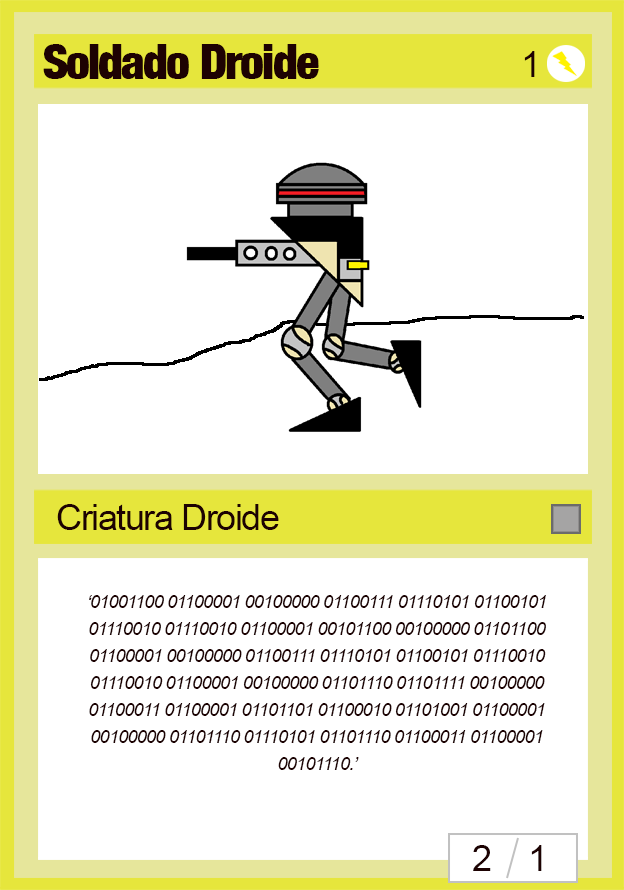
<style>
.page{position:relative;width:624px;height:890px;background:#ffffff}
.page>*{position:absolute;margin:0}
.t1{font:48px "Harvest";letter-spacing:-0.04em;color:#1d0202}
.t2{font:36px "ArialMT";letter-spacing:-0.04em;color:#1d0202}
.t3{font:18px/27px "Arial-ItalicMT";letter-spacing:-0.04em;color:#1d0202}
</style>
<div class="page">
<p class="t1" style="left:43px;top:44px;width:276px;height:35px">Soldado Droide</p>
<p class="t2" style="left:524px;top:51px;width:11px;height:26px">1</p>
<p class="t2" style="left:57px;top:504px;width:222px;height:26px">Criatura Droide</p>
<p class="t3" style="left:89px;top:595px;width:457px;height:175px;text-align:center">‘01001100 01100001 00100000 01100111 01110101 01100101 01110010 01110010 01100001 00101100 00100000 01101100 01100001 00100000 01100111 01110101 01100101 01110010 01110010 01100001 00100000 01101110 01101111 00100000 01100011 01100001 01101101 01100010 01101001 01100001 00100000 01101110 01110101 01101110 01100011 01100001 00101110.’</p>
<p class="t2" style="left:473px;top:845px;width:18px;height:26px">2</p>
<p class="t2" style="left:531px;top:845px;width:11px;height:26px">1</p>
</div>
